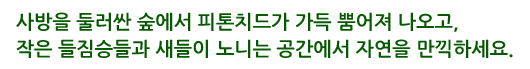
<style>
.page{position:relative;width:530px;height:69px;background:#ffffff}
.page>*{position:absolute;margin:0}
.t1{font:19.2px/26.5px "NanumGothicBold";color:#065900}
</style>
<div class="page">
<p class="t1" style="left:16px;top:12px;width:497px;height:46px">사방을 둘러싼 숲에서 피톤치드가 가득 뿜어져 나오고,<br>작은 들짐승들과 새들이 노니는 공간에서 자연을 만끽하세요.</p>
</div>
